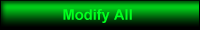
<style>
.page{position:relative;width:200px;height:30px}
.page>*{position:absolute;margin:0}
.t1{font:14.7px "Arial-BoldMT";color:#00ff1e}
</style>
<div class="page">
<p class="t1" style="left:63px;top:9px;width:69px;height:14px">Modify All</p>
</div>
